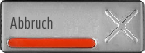
<style>
.page{position:relative;width:145px;height:53px}
.page>*{position:absolute;margin:0}
.t1{font:16px "Venn-CondensedRegular";color:#434343}
</style>
<div class="page">
<p class="t1" style="left:10px;top:16px;width:43px;height:13px">Abbruch</p>
</div>
